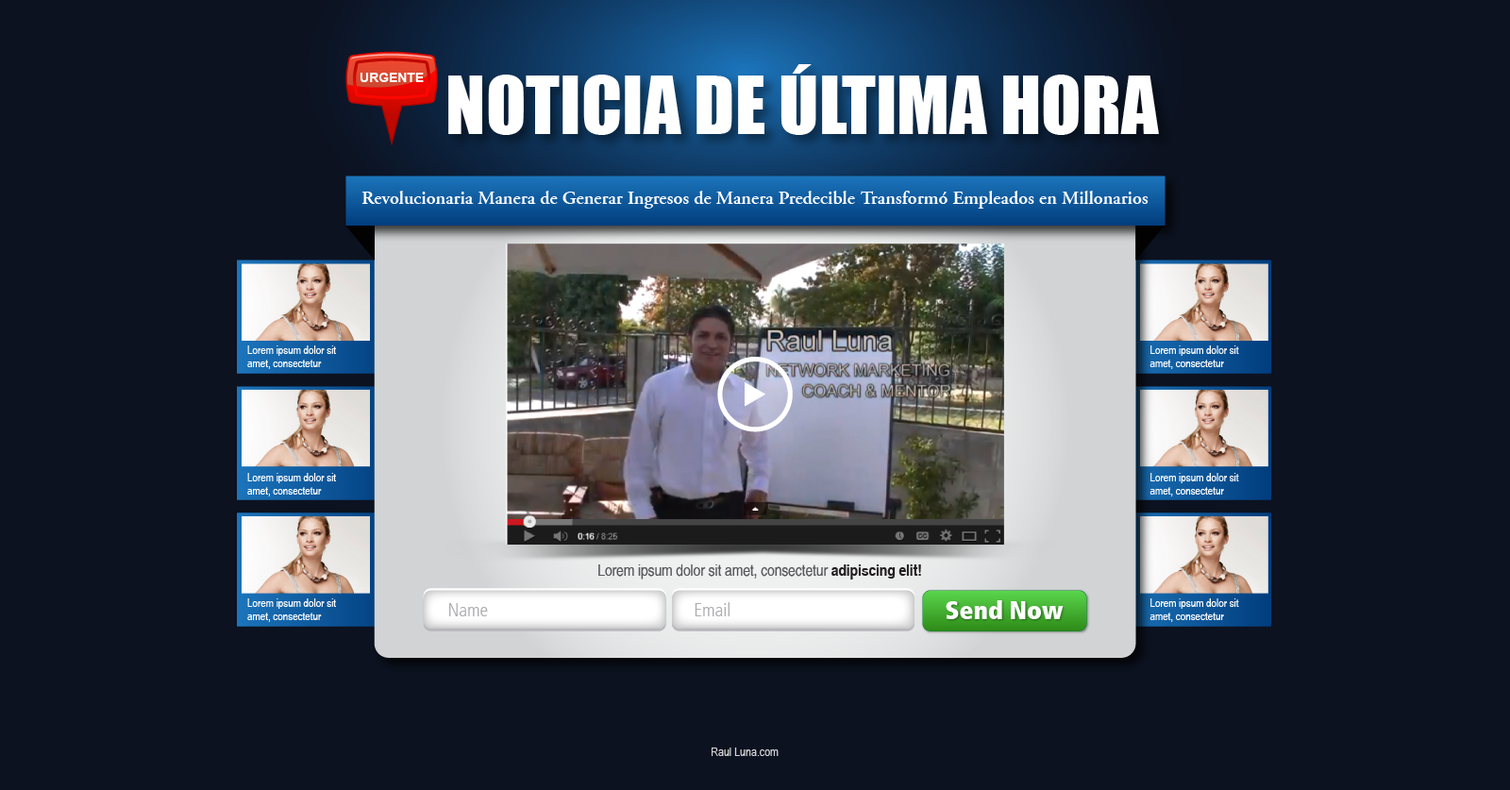
<style>
.page{position:relative;width:1510px;height:790px;background:#0c1220}
.page>*{position:absolute;margin:0}
.t1{font:73.8px "Impact";color:#ffffff}
.t2{font:13.2px "Arial-BoldMT";color:#ffffff}
.t3{font:18.9px "AGaramondLT-Semibold";color:#ffffff}
.t4{font:11.3px "ArialNarrow";color:#ffffff}
.t5{font:15.8px "HelveticaLT-Narrow";color:#58595b}
.t6{font:15.8px "HelveticaLT-Narrow-Bold";color:#231f20}
.t7{font:18.5px "FrutigerLT-LightCn";color:#afafb2}
.t8{font:25.3px "FrutigerLT-ExtraBlackCn";color:#ffffff}
.t9{font:12.3px "ArialNarrow";color:#d6d7d9}
</style>
<div class="page">
<p class="t1" style="left:448px;top:64px;width:711px;height:71px">NOTICIA DE ÚLTIMA HORA</p>
<p class="t2" style="left:360px;top:73px;width:64px;height:9px">URGENTE</p>
<p class="t3" style="left:361px;top:191px;width:787px;height:18px">Revolucionaria Manera de Generar Ingresos de Manera Predecible Transformó Empleados en Millonarios</p>
<p class="t4" style="left:247px;top:345px;width:89px;height:24px">Lorem ipsum dolor sit <br>amet, consectetur</p>
<p class="t4" style="left:1149px;top:345px;width:90px;height:24px">Lorem ipsum dolor sit <br>amet, consectetur</p>
<p class="t4" style="left:247px;top:473px;width:89px;height:23px">Lorem ipsum dolor sit <br>amet, consectetur</p>
<p class="t4" style="left:1149px;top:473px;width:90px;height:23px">Lorem ipsum dolor sit <br>amet, consectetur</p>
<p class="t5" style="left:598px;top:563px;width:323px;height:16px">Lorem ipsum dolor sit amet, consectetur <span class="t6">adipiscing elit!</span></p>
<p class="t4" style="left:247px;top:598px;width:89px;height:24px">Lorem ipsum dolor sit <br>amet, consectetur</p>
<p class="t7" style="left:449px;top:603px;width:39px;height:13px">Name</p>
<p class="t7" style="left:694px;top:602px;width:35px;height:14px">Email</p>
<p class="t8" style="left:946px;top:600px;width:117px;height:19px">Send Now</p>
<p class="t4" style="left:1149px;top:598px;width:90px;height:24px">Lorem ipsum dolor sit <br>amet, consectetur</p>
<p class="t9" style="left:711px;top:747px;width:67px;height:9px">Raul Luna.com</p>
</div>
